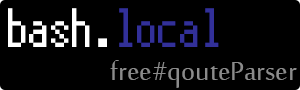
<style>
.page{position:relative;width:300px;height:90px;background:#000000}
.page>*{position:absolute;margin:0}
.t1{font:55px "Terminal";color:#ffffff}
.t2{font:55px "Terminal";color:#323099}
.t3{font:35px "SakkalMajalla";color:#8b8b8b}
</style>
<div class="page">
<p class="t1" style="left:8px;top:8px;width:211px;height:39px">bash.<span class="t2">local</span></p>
<p class="t3" style="left:110px;top:60px;width:187px;height:28px">free#qouteParser</p>
</div>
